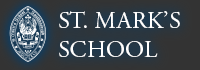
<style>
.page{position:relative;width:200px;height:70px}
.page>*{position:absolute;margin:0}
.t1{font:24px "AGaramondPro-Regular";color:#ffffff}
</style>
<div class="page">
<p class="t1" style="left:59px;top:11px;width:121px;height:46px">ST. MARK’S<br>SCHOOL</p>
</div>
